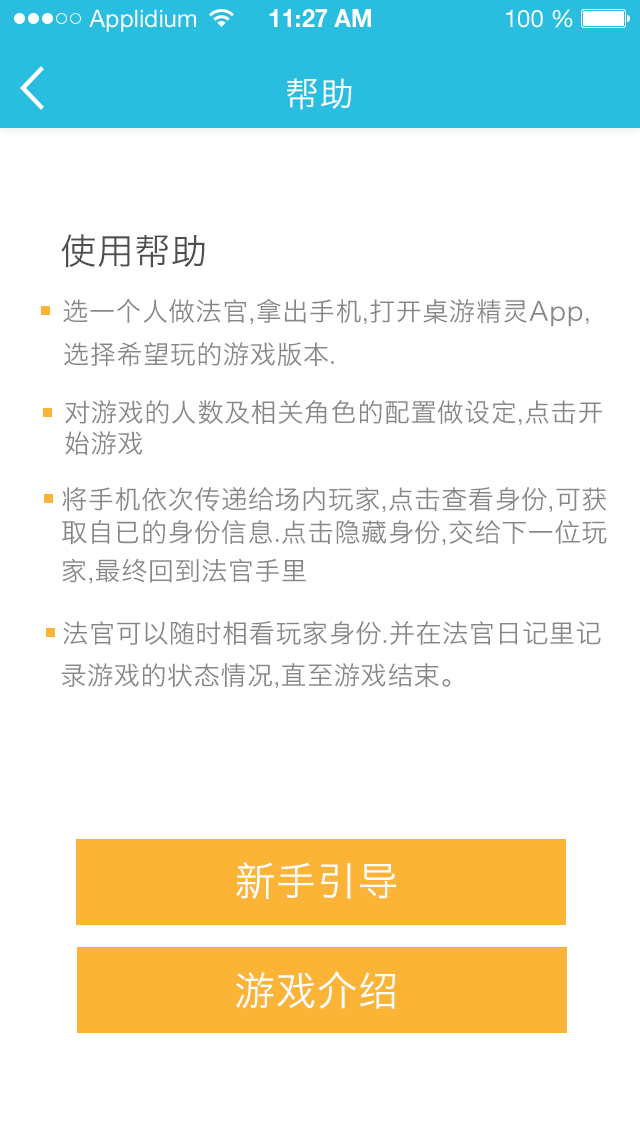
<style>
.page{position:relative;width:640px;height:1136px;background:#ffffff}
.page>*{position:absolute;margin:0}
.t1{font:34px "HiraginoSansGB-W3";letter-spacing:0.025em;color:#ffffff}
.t2{font:36px "HiraginoSansGB-W3";letter-spacing:0.025em;color:#4e4e4e}
.t3{font:26px "HiraginoSansGB-W3";letter-spacing:0.025em;color:#868686}
.t4{font:26px "HiraginoSansGB-W3";letter-spacing:-0.175em;color:#868686}
.t5{font:26px "HiraginoSansGB-W3";letter-spacing:-0.18em;color:#868686}
.t6{font:26px/38.4px "HiraginoSansGB-W3";letter-spacing:0.025em;color:#868686}
.t7{font:26px "HiraginoSansGB-W3";letter-spacing:-0.275em;color:#868686}
.t8{font:40px "HiraginoSansGB-W3";letter-spacing:0.025em;color:#ffffff}
</style>
<div class="page">
<p class="t1" style="left:286px;top:78px;width:66px;height:32px">帮助</p>
<p class="t2" style="left:61px;top:234px;width:144px;height:34px">使用帮助</p>
<p class="t3" style="left:63px;top:298px;width:526px;height:29px">选一个人做法官,拿出手机,打开桌游精灵App,</p>
<p class="t3" style="left:63px;top:342px;width:271px;height:25px"><span class="t4"> </span>选择希望玩的游戏版本.</p>
<p class="t3" style="left:65px;top:400px;width:537px;height:25px">对游戏的人数及相关角色的配置做设定,点击开</p>
<p class="t3" style="left:65px;top:431px;width:78px;height:24px"><span class="t5"> </span>始游戏</p>
<p class="t3" style="left:62px;top:487px;width:544px;height:25px">将手机依次传递给场内玩家,点击查看身份,可获</p>
<p class="t6" style="left:62px;top:520px;width:545px;height:64px">取自已的身份信息.点击隐藏身份,交给下一位玩<br>家,最终回到法官手里</p>
<p class="t3" style="left:63px;top:621px;width:538px;height:24px">法官可以随时相看玩家身份.并在法官日记里记</p>
<p class="t3" style="left:61px;top:663px;width:390px;height:25px"><span class="t7"> </span>录游戏的状态情况,直至游戏结束。</p>
<p class="t8" style="left:236px;top:862px;width:160px;height:37px">新手引导</p>
<p class="t8" style="left:236px;top:971px;width:160px;height:38px">游戏介绍</p>
</div>
